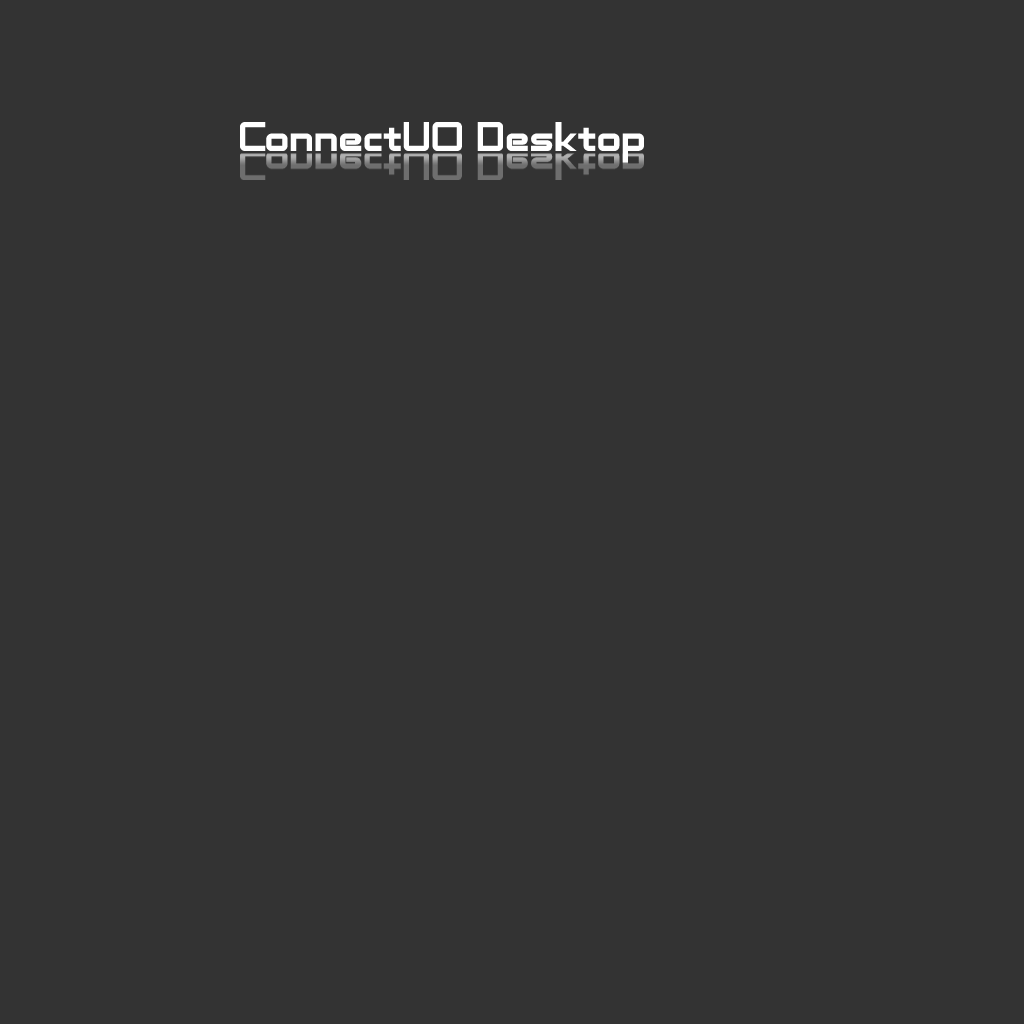
<style>
.page{position:relative;width:1024px;height:1024px;background:#333333}
.page>*{position:absolute;margin:0}
.t1{font:41.7px "AdventureSubtitlesNormal";color:#ffffff}
</style>
<div class="page">
<p class="t1" style="left:240px;top:122px;width:404px;height:41px">ConnectUO Desktop</p>
</div>
